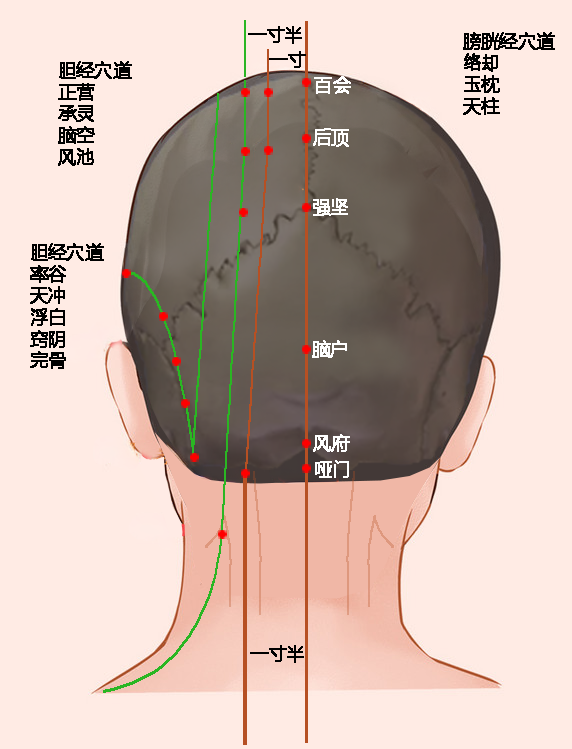
<style>
.page{position:relative;width:572px;height:749px;background:#ffebe4}
.page>*{position:absolute;margin:0}
.t1{font:18px "MicrosoftYaHei";color:#000000;font-weight:bold}
.t2{font:18px "MicrosoftYaHei";color:#ffffff;font-weight:bold}
</style>
<div class="page">
<p class="t1" style="left:248px;top:26px;width:54px;height:18px">一寸半</p>
<p class="t1" style="left:463px;top:32px;width:92px;height:83px">膀胱经穴道<br>络却<br>玉枕<br>天柱</p>
<p class="t1" style="left:269px;top:51px;width:37px;height:17px">一寸</p>
<p class="t1" style="left:58px;top:61px;width:74px;height:105px">胆经穴道<br>正营<br>承灵<br>脑空<br>风池</p>
<p class="t2" style="left:314px;top:76px;width:37px;height:18px">百会</p>
<p class="t2" style="left:313px;top:128px;width:36px;height:19px">后顶</p>
<p class="t2" style="left:313px;top:198px;width:35px;height:18px">强坚</p>
<p class="t1" style="left:30px;top:243px;width:74px;height:126px">胆经穴道<br>率谷<br>天冲<br>浮白<br>窍阴<br>完骨</p>
<p class="t2" style="left:312px;top:340px;width:35px;height:18px">脑户</p>
<p class="t2" style="left:313px;top:434px;width:37px;height:18px">风府</p>
<p class="t2" style="left:315px;top:460px;width:34px;height:18px">哑门</p>
<p class="t1" style="left:250px;top:645px;width:54px;height:18px">一寸半</p>
</div>
